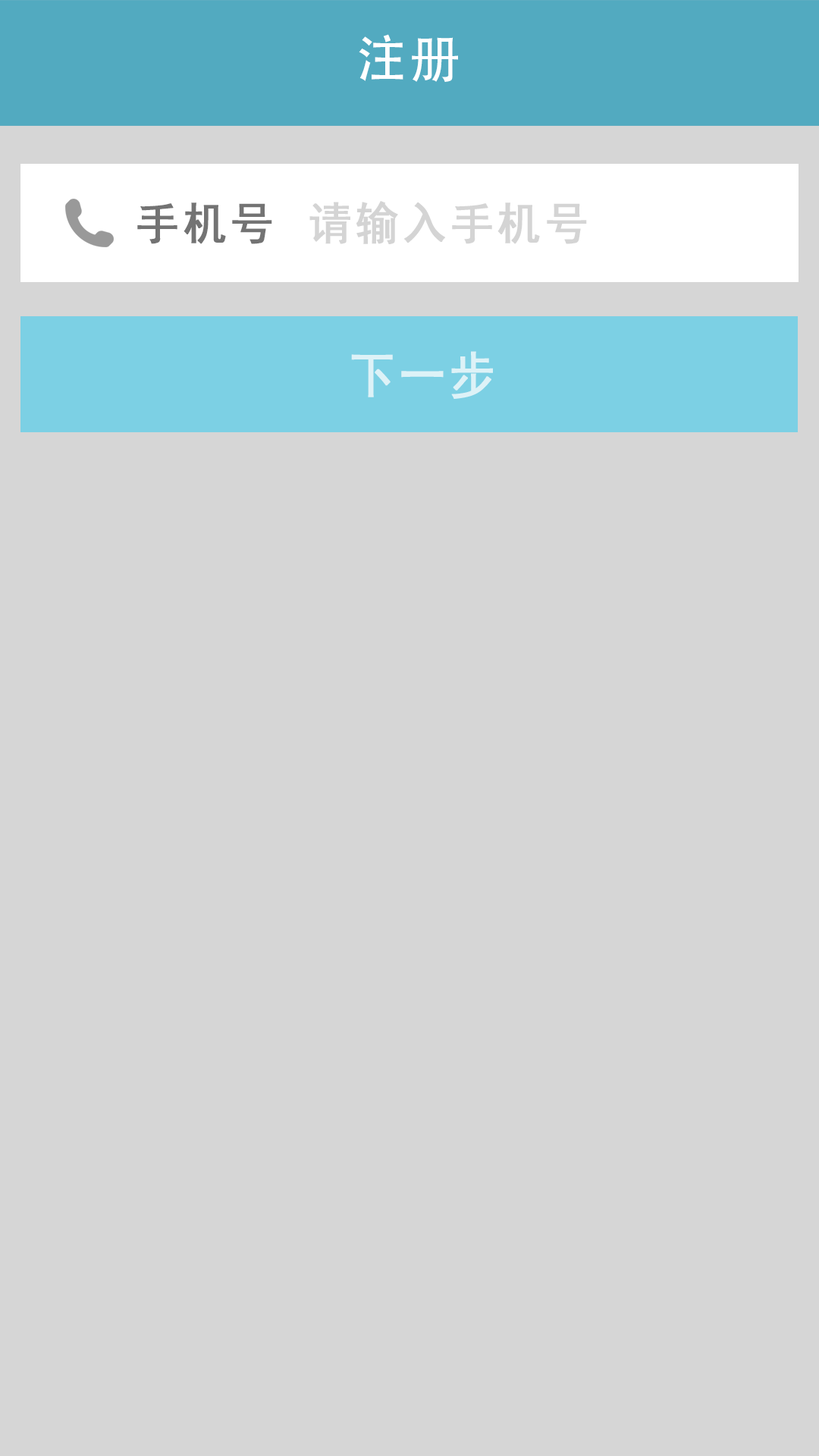
<style>
.page{position:relative;width:819px;height:1456px;background:#d6d6d6}
.page>*{position:absolute;margin:0}
.t1{font:50.8px "AdobeHeitiStd-Regular";letter-spacing:0.06em;color:#ffffff}
.t2{font:45.5px "SimHei";letter-spacing:0.06em;color:#737373;font-weight:bold;scale:0.95 1}
.t3{font:45.5px "SimHei";letter-spacing:0.06em;color:#d4d4d4;font-weight:bold;scale:0.95 1}
.t4{font:51.8px "SimHei";letter-spacing:0.06em;color:#ddf2f7;font-weight:bold;scale:0.88 1}
</style>
<div class="page">
<p class="t1" style="left:359px;top:34px;width:99px;height:48px">注册</p>
<p class="t2" style="left:137px;top:202px;width:135px;height:42px">手机号</p>
<p class="t3" style="left:309px;top:201px;width:278px;height:43px">请输入手机号</p>
<p class="t4" style="left:351px;top:351px;width:142px;height:48px">下一步</p>
</div>
